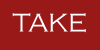
<style>
.page{position:relative;width:100px;height:50px;background:#991919}
.page>*{position:absolute;margin:0}
.t1{font:26.7px "CopperplateGothic-Light";color:#ffffff}
</style>
<div class="page">
<p class="t1" style="left:12px;top:13px;width:74px;height:20px">TAKE</p>
</div>
